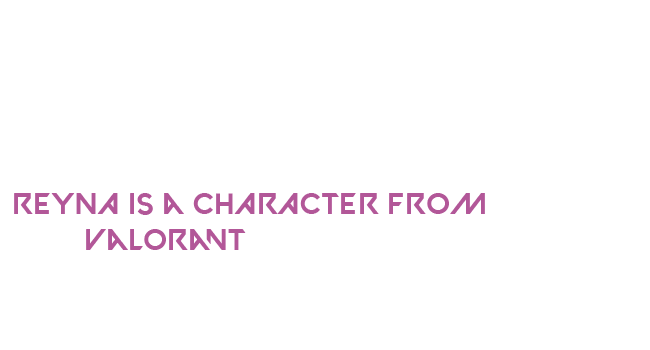
<style>
.page{position:relative;width:650px;height:350px;background:#ffffff}
.page>*{position:absolute;margin:0}
.t1{font:30px "VALORANT-Regular";color:#b25798}
</style>
<div class="page">
<p class="t1" style="left:14px;top:193px;width:471px;height:57px">REYNA IS a cHARACTER fROM <br>  valorant</p>
</div>
